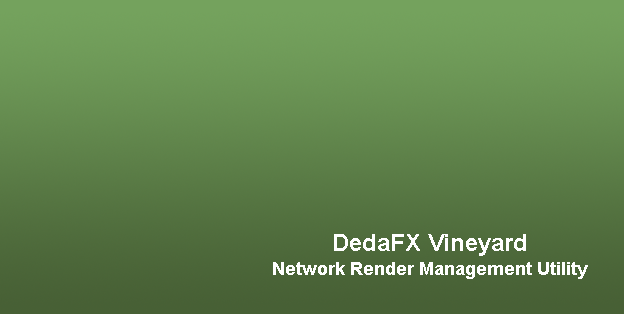
<style>
.page{position:relative;width:624px;height:314px}
.page>*{position:absolute;margin:0}
.t1{font:18px/12px "Arial-BoldMT";color:#ffffff}
.t2{font:24px/12px "Arial-BoldMT";color:#ffffff}
</style>
<div class="page">
<p class="t1" style="left:273px;top:234px;width:315px;height:45px;text-align:center"><span class="t2">DedaFX Vineyard<br><br></span>Network Render Management Utility</p>
</div>
